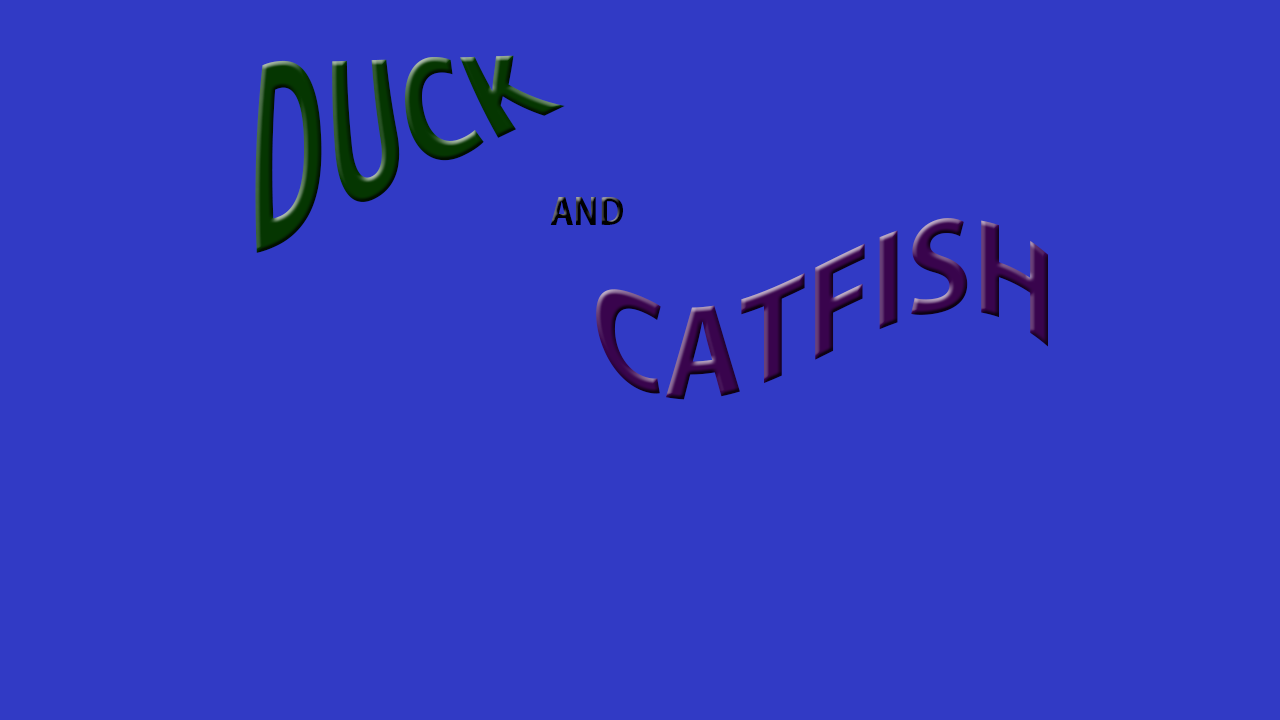
<style>
.page{position:relative;width:1280px;height:720px;background:#313ac5}
.page>*{position:absolute;margin:0}
.t1{font:120px "KozGoPr6N-Bold";color:#053601}
.t2{font:36px "KozGoPr6N-Bold";color:#000000}
.t3{font:120px "KozGoPr6N-Bold";color:#39044d}
</style>
<div class="page">
<p class="t1" style="left:255px;top:55px;width:310px;height:198px;rotate:-19deg">DUCK</p>
<p class="t2" style="left:550px;top:197px;width:73px;height:28px">AND</p>
<p class="t3" style="left:596px;top:218px;width:452px;height:182px">CATFISH</p>
</div>
